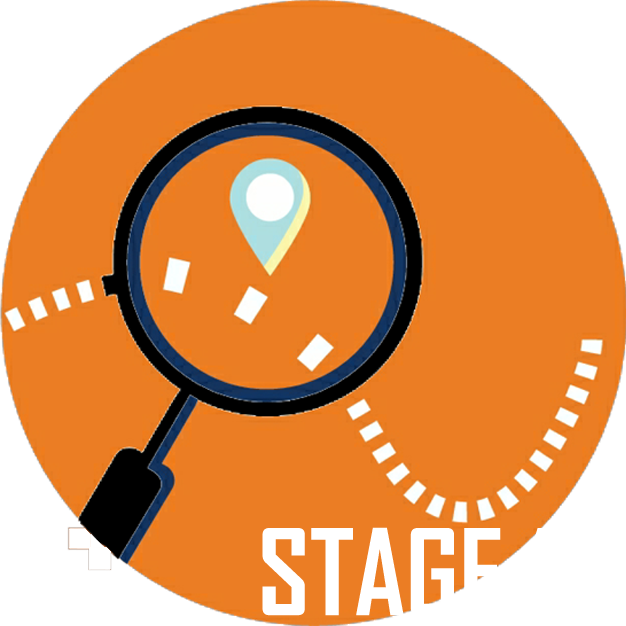
<style>
.page{position:relative;width:626px;height:626px;background:#eb7d24}
.page>*{position:absolute;margin:0}
.t1{font:114px "AgencyFB-Bold";color:#ffffff}
</style>
<div class="page">
<p class="t1" style="left:262px;top:527px;width:287px;height:89px">STAGE 1</p>
</div>
